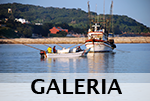
<style>
.page{position:relative;width:150px;height:101px}
.page>*{position:absolute;margin:0}
.t1{font:20.8px "LucidaSans-Demi";color:#000000}
</style>
<div class="page">
<p class="t1" style="left:31px;top:79px;width:91px;height:15px">GALERIA</p>
</div>
